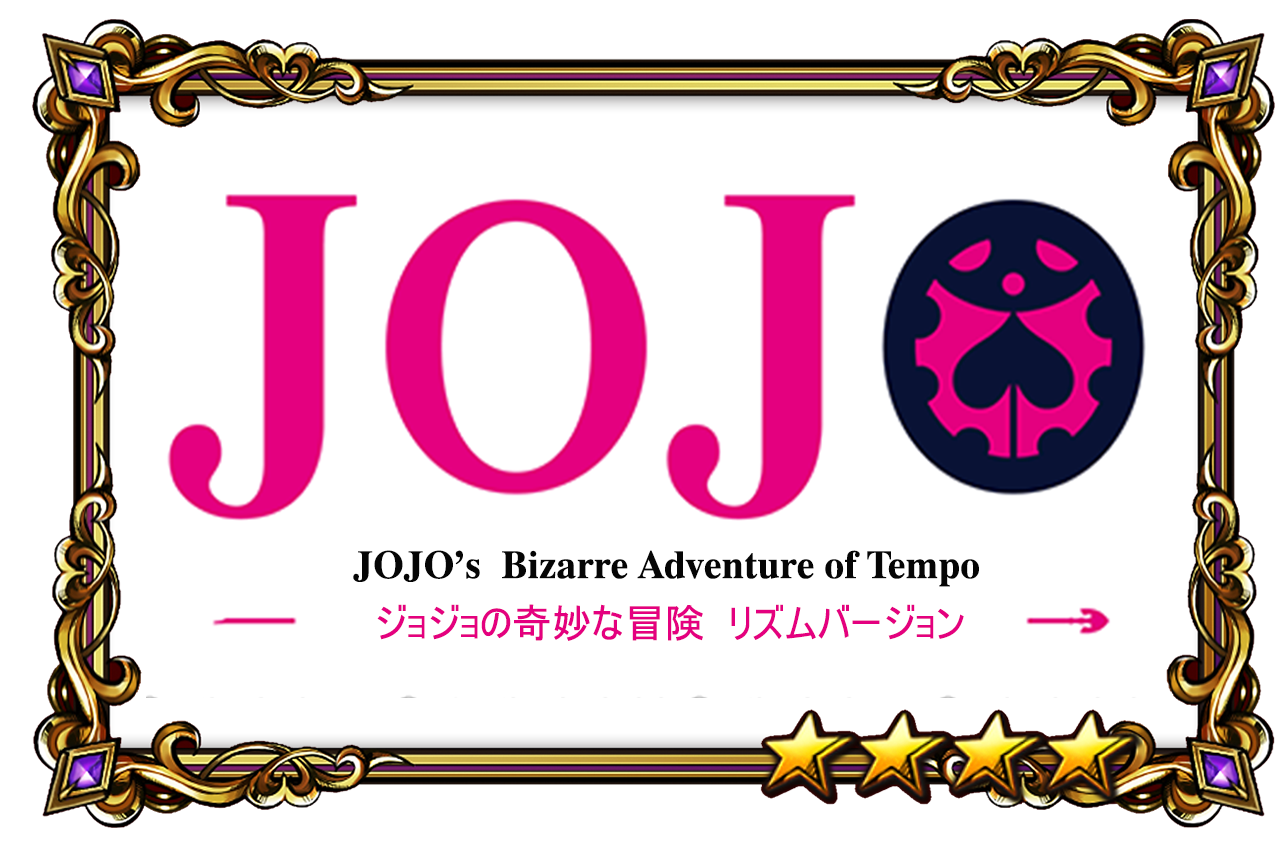
<style>
.page{position:relative;width:1280px;height:848px;background:#ffffff}
.page>*{position:absolute;margin:0}
.t1{font:39.6px "Dutch801BT-Bold";color:#050505}
.t2{font:39.6px "MS-UIGothic";color:#e4007f}
</style>
<div class="page">
<p class="t1" style="left:353px;top:550px;width:626px;height:37px">JOJO’s  Bizarre Adventure of Tempo</p>
<p class="t2" style="left:377px;top:604px;width:587px;height:37px">ジョジョの奇妙な冒険  リズムバージョン</p>
</div>
